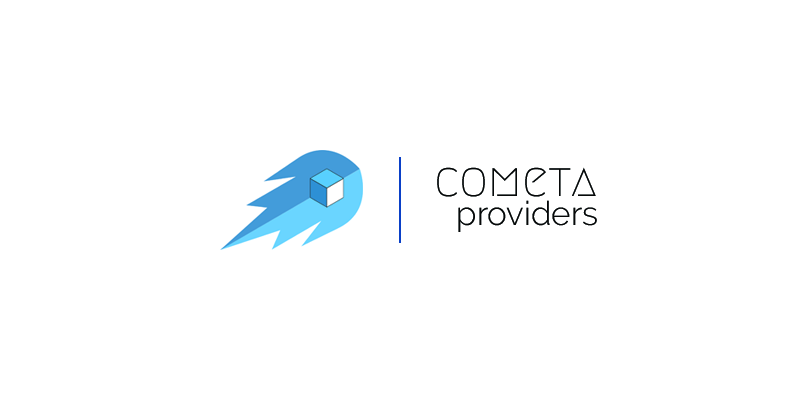
<style>
.page{position:relative;width:800px;height:400px;background:#ffffff}
.page>*{position:absolute;margin:0}
.t1{font:47.8px "Megrim";color:#060808}
.t2{font:33.3px "Raleway-Light";color:#060808}
</style>
<div class="page">
<p class="t1" style="left:437px;top:167px;width:159px;height:30px">cometa</p>
<p class="t2" style="left:458px;top:200px;width:139px;height:32px">providers</p>
</div>
